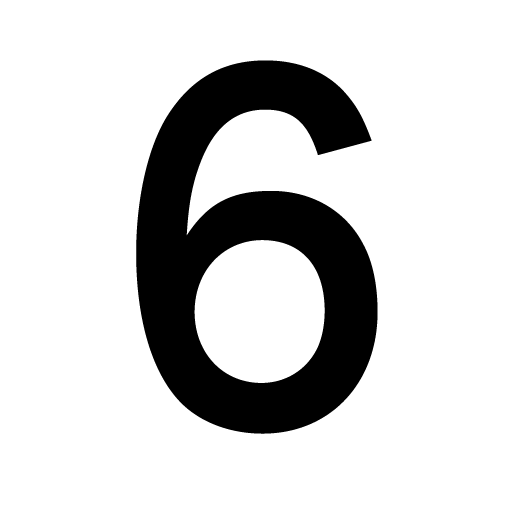
<style>
.page{position:relative;width:512px;height:512px;background:#ffffff}
.page>*{position:absolute;margin:0}
.t1{font:450px "HiraKakuPro-W6";color:#000000;scale:0.88 1}
</style>
<div class="page">
<p class="t1" style="left:136px;top:60px;width:242px;height:374px">6</p>
</div>
